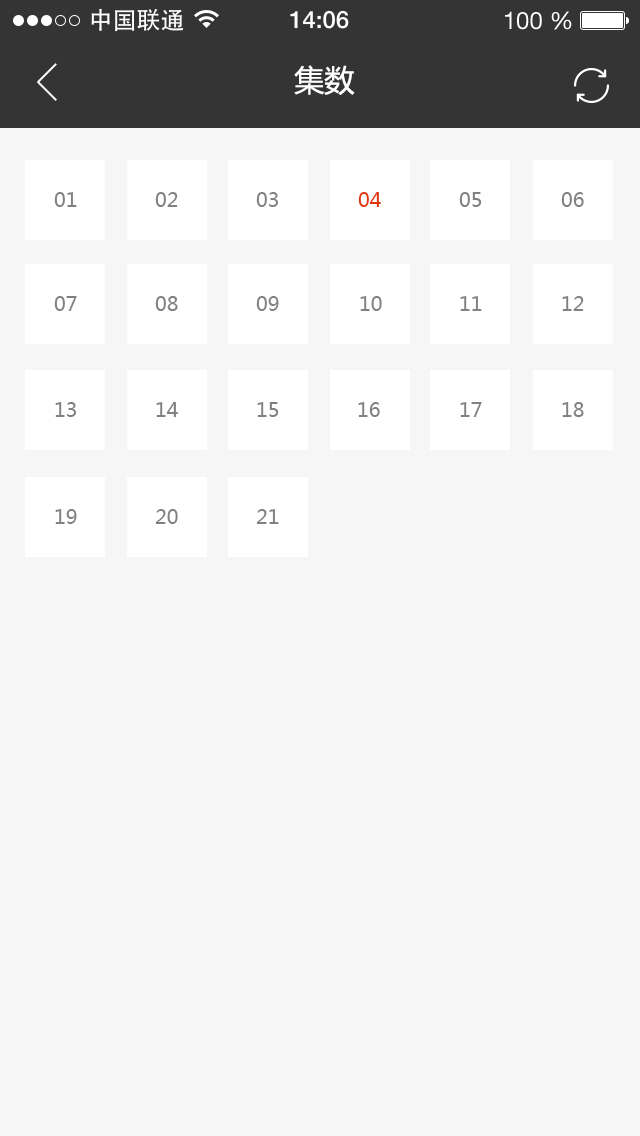
<style>
.page{position:relative;width:640px;height:1136px;background:#f6f6f6}
.page>*{position:absolute;margin:0}
.t1{font:30px "MicrosoftYaHei";color:#ffffff}
.t2{font:20px "MicrosoftYaHei";color:#818181;text-transform:uppercase}
.t3{font:20px "MicrosoftYaHei";color:#e13811;text-transform:uppercase}
</style>
<div class="page">
<p class="t1" style="left:294px;top:65px;width:61px;height:30px">集数</p>
<p class="t2" style="left:54px;top:192px;width:23px;height:15px">01</p>
<p class="t2" style="left:155px;top:192px;width:23px;height:15px">02</p>
<p class="t2" style="left:256px;top:192px;width:23px;height:15px">03</p>
<p class="t3" style="left:358px;top:192px;width:23px;height:15px">04</p>
<p class="t2" style="left:459px;top:192px;width:23px;height:15px">05</p>
<p class="t2" style="left:561px;top:192px;width:23px;height:15px">06</p>
<p class="t2" style="left:54px;top:296px;width:23px;height:15px">07</p>
<p class="t2" style="left:155px;top:296px;width:23px;height:15px">08</p>
<p class="t2" style="left:256px;top:296px;width:23px;height:15px">09</p>
<p class="t2" style="left:360px;top:296px;width:22px;height:15px">10</p>
<p class="t2" style="left:460px;top:296px;width:22px;height:15px">11</p>
<p class="t2" style="left:562px;top:296px;width:22px;height:15px">12</p>
<p class="t2" style="left:55px;top:402px;width:22px;height:15px">13</p>
<p class="t2" style="left:156px;top:402px;width:22px;height:15px">14</p>
<p class="t2" style="left:257px;top:402px;width:22px;height:15px">15</p>
<p class="t2" style="left:358px;top:402px;width:22px;height:15px">16</p>
<p class="t2" style="left:460px;top:402px;width:22px;height:15px">17</p>
<p class="t2" style="left:562px;top:402px;width:22px;height:15px">18</p>
<p class="t2" style="left:55px;top:509px;width:22px;height:15px">19</p>
<p class="t2" style="left:155px;top:509px;width:23px;height:15px">20</p>
<p class="t2" style="left:256px;top:509px;width:23px;height:15px">21</p>
</div>
